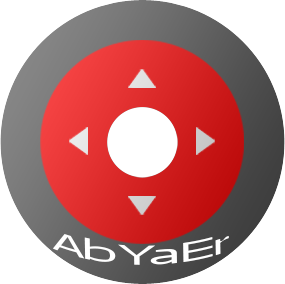
<style>
.page{position:relative;width:285px;height:284px;background:#ffffff}
.page>*{position:absolute;margin:0}
.t1{font:25.3px "Tahoma";color:#ffffff;scale:2.3 1}
</style>
<div class="page">
<p class="t1" style="left:52px;top:234px;width:177px;height:31px">AbYaEr</p>
</div>
